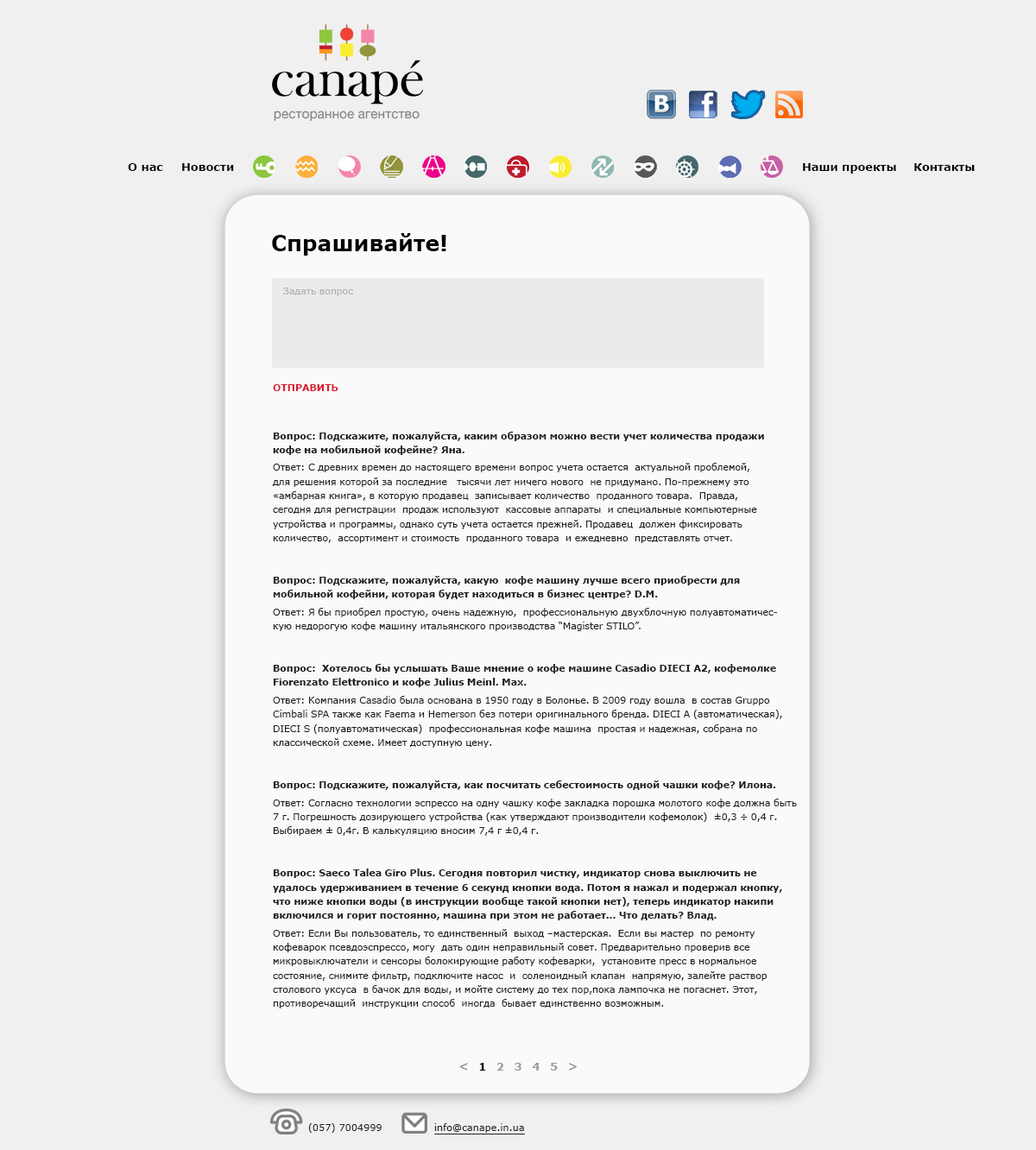
<style>
.page{position:relative;width:1036px;height:1150px;background:#f0f0f0}
.page>*{position:absolute;margin:0}
.t1{font:11.2px "Verdana-Bold";color:#000000}
.t2{font:21.6px "Verdana-Bold";color:#000000}
.t3{font:9.7px "Verdana";letter-spacing:-0.02em;color:#b2b2b2}
.t4{font:9.7px "Verdana-Bold";letter-spacing:-0.02em;color:#d82031}
.t5{font:9.7px/14.1px "Verdana";letter-spacing:-0.02em;color:#231f20}
.t6{font:9.7px/14.1px "Verdana-Bold";letter-spacing:-0.02em;color:#231f20}
.t7{font:10.8px "Verdana-Bold";letter-spacing:-0.02em;color:#9b9b9b}
.t8{font:10.8px "Verdana-Bold";letter-spacing:-0.02em;color:#000000}
.t9{font:9.7px "Verdana";color:#231f20}
</style>
<div class="page">
<p class="t1" style="left:128px;top:163px;width:35px;height:8px">О нас</p>
<p class="t1" style="left:182px;top:163px;width:52px;height:8px">Новости</p>
<p class="t1" style="left:803px;top:163px;width:94px;height:11px">Наши проекты</p>
<p class="t1" style="left:915px;top:163px;width:60px;height:8px">Контакты</p>
<p class="t2" style="left:272px;top:233px;width:175px;height:23px">Спрашивайте!</p>
<p class="t3" style="left:283px;top:288px;width:70px;height:8px">Задать вопрос</p>
<p class="t4" style="left:273px;top:384px;width:66px;height:7px">ОТПРАВИТЬ</p>
<p class="t5" style="left:272px;top:432px;width:525px;height:577px"><span class="t6">Вопрос: Подскажите, пожалуйста, каким образом можно вести учет количества продажи<br>кофе на мобильной кофейне? Яна.<br></span>Ответ: С древних времен до настоящего времени вопрос учета остается  актуальной проблемой,<br>для решения которой за последние   тысячи лет ничего нового  не придумано. По-прежнему это<br>«амбарная книга», в которую продавец  записывает количество  проданного товара.  Правда,<br>сегодня для регистрации  продаж используют  кассовые аппараты  и специальные компьютерные<br>устройства и программы, однако суть учета остается прежней. Продавец  должен фиксировать<br>количество,  ассортимент и стоимость  проданного товара  и ежедневно  представлять отчет.<br><br><br><span class="t6">Вопрос: Подскажите, пожалуйста, какую  кофе машину лучше всего приобрести для<br>мобильной кофейни, которая будет находиться в бизнес центре? D.M.</span><br>Ответ: Я бы приобрел простую, очень надежную,  профессиональную двухблочную полуавтоматичес-<br>кую недорогую кофе машину итальянского производства “Magister STILO”.<br><br><br><span class="t6">Вопрос:  Хотелось бы услышать Ваше мнение о кофе машине Casadio DIECI A2, кофемолке<br>Fiorenzato Elettronico и кофе Julius Meinl. Mах.</span><br>Ответ: Компания Casadio была основана в 1950 году в Болонье. В 2009 году вошла  в состав Gruppo<br>Cimbali SPA также как Faema и Hemerson без потери оригинального бренда. DIECI A (автоматическая),<br>DIECI S (полуавтоматическая)  профессиональная кофе машина  простая и надежная, собрана по<br>классической схеме. Имеет доступную цену.<br><br><br><span class="t6">Вопрос: Подскажите, пожалуйста, как посчитать себестоимость одной чашки кофе? Илона.</span><br>Ответ: Согласно технологии эспрессо на одну чашку кофе закладка порошка молотого кофе должна быть<br>7 г. Погрешность дозирующего устройства (как утверждают производители кофемолок)  ±0,3 ÷ 0,4 г.<br>Выбираем ± 0,4г. В калькуляцию вносим 7,4 г ±0,4 г.<br><br><br><span class="t6">Вопрос: Saeco Talea Giro Plus. Сегодня повторил чистку, индикатор снова выключить не<br>удалось удерживанием в течение 6 секунд кнопки вода. Потом я нажал и подержал кнопку,<br>что ниже кнопки воды (в инструкции вообще такой кнопки нет), теперь индикатор накипи<br>включился и горит постоянно, машина при этом не работает... Что делать? Влад.</span><br>Ответ: Если Вы пользователь, то единственный  выход –мастерская.  Если вы мастер  по ремонту<br>кофеварок псевдоэспрессо, могу  дать один неправильный совет. Предварительно проверив все<br>микровыключатели и сенсоры болокирующие работу кофеварки,  установите пресс в нормальное<br>состояние, снимите фильтр, подключите насос  и  соленоидный клапан  напрямую, залейте раствор<br>столового уксуса  в бачок для воды, и мойте систему до тех пор,пока лампочка не погаснет. Этот,<br>противоречащий  инструкции способ  иногда  бывает единственно возможным.</p>
<p class="t7" style="left:460px;top:1063px;width:117px;height:8px">&lt;   <span class="t8">1</span>   2   3   4   5   &gt;</p>
<p class="t9" style="left:308px;top:1124px;width:74px;height:9px">(057) 7004999</p>
<p class="t9" style="left:434px;top:1124px;width:90px;height:9px">info@canape.in.ua</p>
</div>
